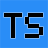
<style>
.page{position:relative;width:48px;height:48px;background:#298df7}
.page>*{position:absolute;margin:0}
.t1{font:28px "HD44780";color:#000000}
</style>
<div class="page">
<p class="t1" style="left:4px;top:13px;width:39px;height:25px">TS</p>
</div>
